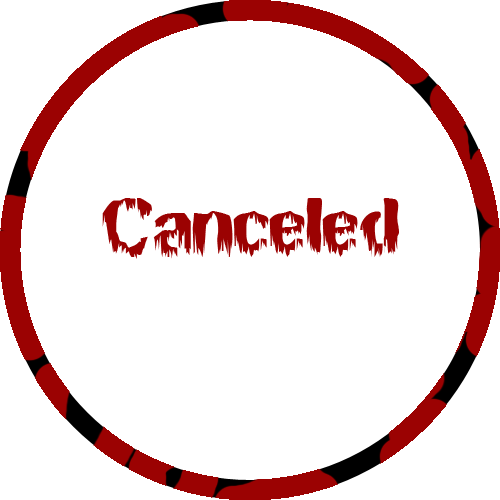
<style>
.page{position:relative;width:500px;height:500px;background:#ffffff}
.page>*{position:absolute;margin:0}
.t1{font:80px "BNMansonNights";color:#9b0202}
</style>
<div class="page">
<p class="t1" style="left:102px;top:198px;width:297px;height:61px">Canceled</p>
</div>
